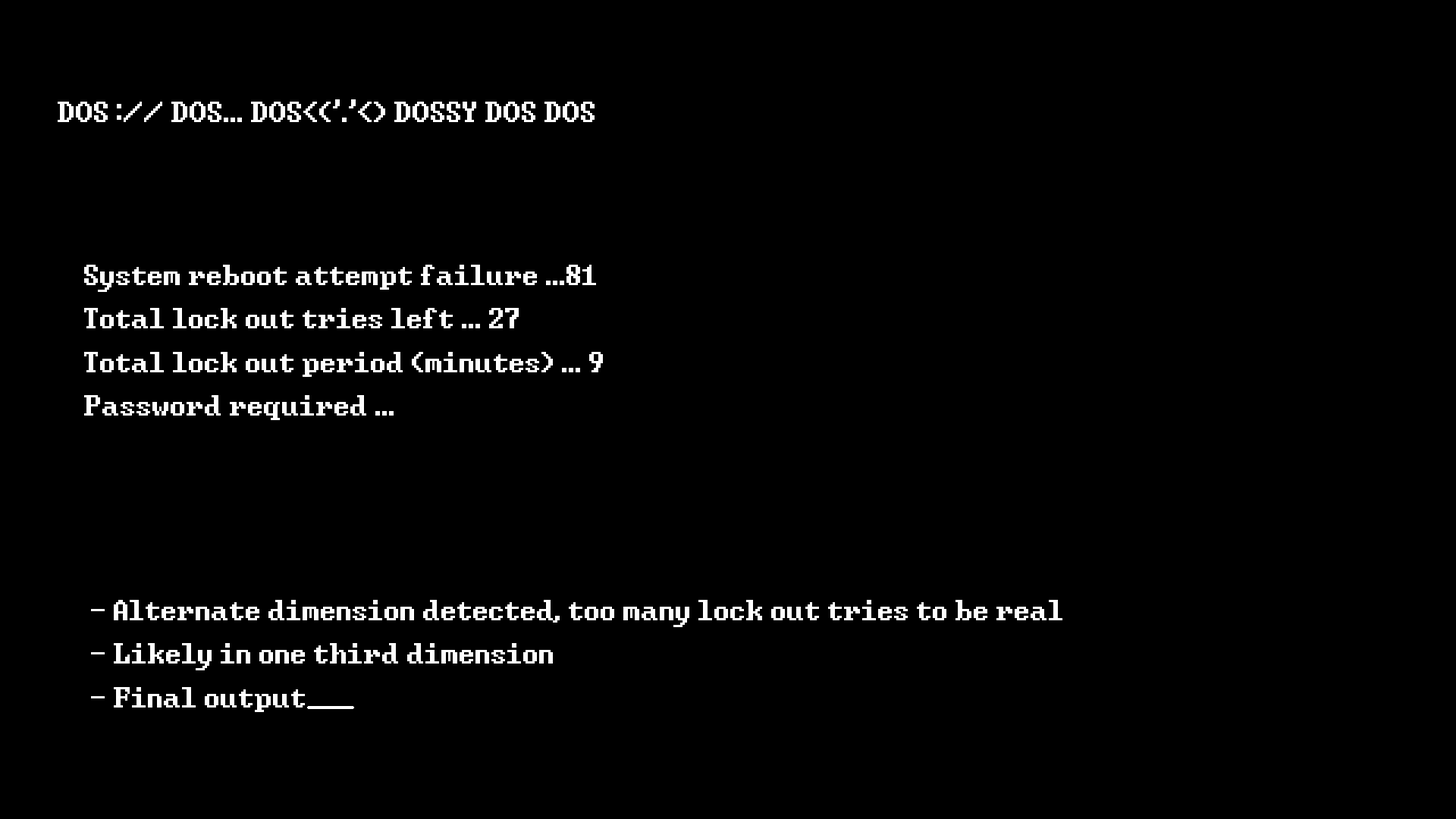
<style>
.page{position:relative;width:1456px;height:819px;background:#000000}
.page>*{position:absolute;margin:0}
.t1{font:36.4px "Windows-Command-Prompt";color:#ffffff}
</style>
<div class="page">
<p class="t1" style="left:58px;top:99px;width:537px;height:23px">DOS :// DOS... DOS&lt;('.'&lt;) DOSSY DOS DOS</p>
<p class="t1" style="left:84px;top:265px;width:519px;height:155px">System reboot attempt failure ...81<br>Total lock out tries left ... 27 <br>Total lock out period (minutes) ... 9<br>Password required ...</p>
<p class="t1" style="left:91px;top:600px;width:971px;height:112px">- Alternate dimension detected, too many lock out tries to be real<br>- Likely in one third dimension<br>- Final output</p>
</div>
